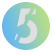
<style>
.page{position:relative;width:52px;height:52px;background:#ffffff}
.page>*{position:absolute;margin:0}
.t1{font:45.7px "FuturaStd-Heavy";letter-spacing:-0.01em;color:#dfdfdf}
</style>
<div class="page">
<p class="t1" style="left:14px;top:8px;width:24px;height:36px">5</p>
</div>
